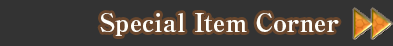
<style>
.page{position:relative;width:393px;height:46px;background:#333333}
.page>*{position:absolute;margin:0}
.t1{font:25px "RyuminPro-ExBold";color:#fffffa}
</style>
<div class="page">
<p class="t1" style="left:100px;top:13px;width:239px;height:23px">Special Item Corner</p>
</div>
